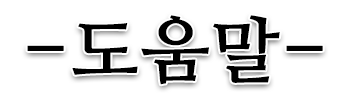
<style>
.page{position:relative;width:350px;height:100px;background:#ffffff}
.page>*{position:absolute;margin:0}
.t1{font:72px "NanumMyeongjoBold";color:#000000;font-weight:bold}
</style>
<div class="page">
<p class="t1" style="left:27px;top:15px;width:296px;height:70px">-도움말-</p>
</div>
